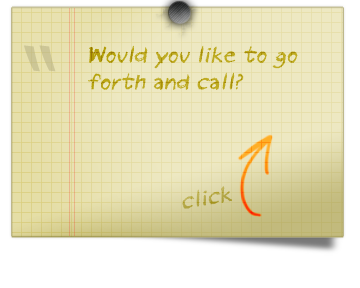
<style>
.page{position:relative;width:360px;height:288px;background:#ffffff}
.page>*{position:absolute;margin:0}
.t1{font:105px "MyriadPro-Regular";color:#ccc696}
.t2{font:22px/27px "pastel";font-style:italic}
.t3{font:22px "pastel";color:#b3a747;font-style:italic}
</style>
<div class="page">
<p class="t1" style="left:24px;top:45px;width:32px;height:27px">“</p>
<p class="t2" style="left:88px;top:45px;width:210px;height:45px">Would you like to go forth and call?</p>
<p class="t2" style="left:88px;top:45px;width:210px;height:45px">Would you like to go forth and call?</p>
<p class="t3" style="left:182px;top:186px;width:50px;height:23px;rotate:-10deg">click</p>
</div>
